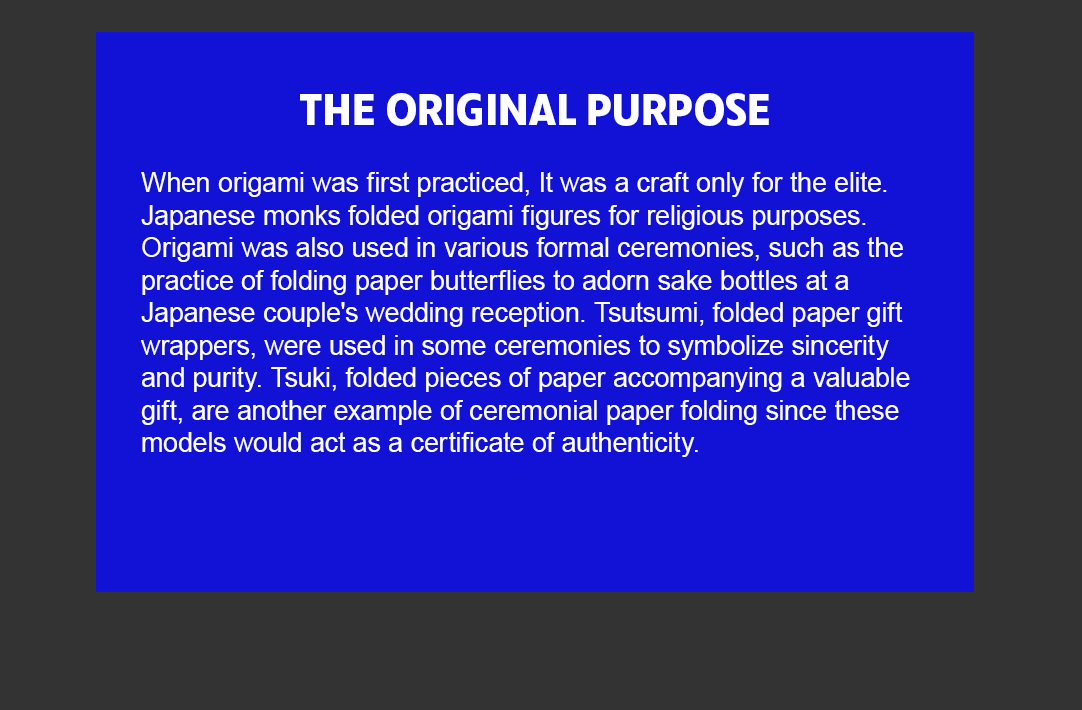
<style>
.page{position:relative;width:1082px;height:710px;background:#1212d7}
.page>*{position:absolute;margin:0}
.t1{font:27.1px "ArialMT";letter-spacing:-0.005em;color:#ffffff}
.t2{font:45.8px "RuckSack-Bold";color:#ffffff}
</style>
<div class="page">
<p class="t1" style="left:141px;top:93px;width:769px;height:364px;text-align:center"><span class="t2">THE ORIGINAL PURPOSE<br><br></span>When origami was first practiced, It was a craft only for the elite. Japanese monks folded origami figures for religious purposes. <br>Origami was also used in various formal ceremonies, such as the practice of folding paper butterflies to adorn sake bottles at a <br>Japanese couple's wedding reception. Tsutsumi, folded paper gift wrappers, were used in some ceremonies to symbolize sincerity and purity. Tsuki, folded pieces of paper accompanying a valuable gift, are another example of ceremonial paper folding since these models would act as a certificate of authenticity.</p>
</div>
